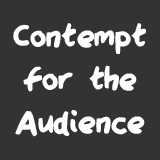
<style>
.page{position:relative;width:160px;height:160px;background:#333333}
.page>*{position:absolute;margin:0}
.t1{font:35.9px "QAReports";color:#ffffff}
</style>
<div class="page">
<p class="t1" style="left:13px;top:23px;width:133px;height:114px;text-align:center">Contempt<br>for the<br>Audience</p>
</div>
